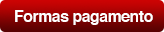
<style>
.page{position:relative;width:164px;height:32px}
.page>*{position:absolute;margin:0}
.t1{font:15.7px "Helvetica-Bold";letter-spacing:-0.025em;color:#ffffff}
</style>
<div class="page">
<p class="t1" style="left:15px;top:10px;width:138px;height:15px">Formas pagamento</p>
</div>
